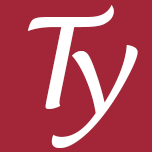
<style>
.page{position:relative;width:152px;height:152px;background:#a32638}
.page>*{position:absolute;margin:0}
.t1{font:125px "LucidaHandwriting-Italic";color:#ffffff}
</style>
<div class="page">
<p class="t1" style="left:27px;top:5px;width:87px;height:104px">T</p>
<p class="t1" style="left:51px;top:45px;width:87px;height:103px">y</p>
</div>
